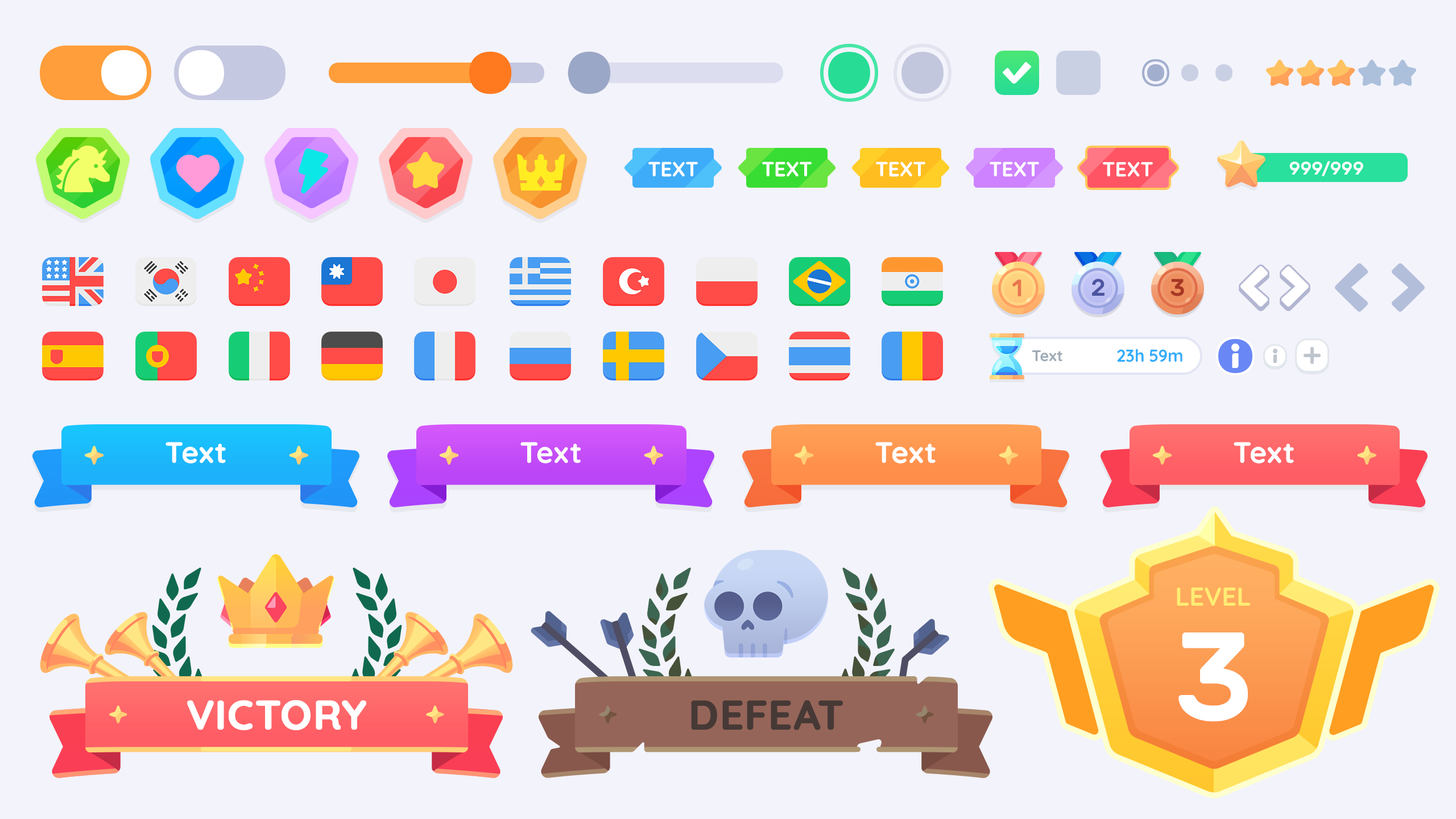
<style>
.page{position:relative;width:1456px;height:819px;background:#f3f3fb}
.page>*{position:absolute;margin:0}
.t1{font:20.5px "Quicksand-Bold";color:#ffffff;text-transform:uppercase}
.t2{font:20.5px "Quicksand-Bold";letter-spacing:0.01em;color:#ffffff;text-transform:uppercase}
.t3{font:18.2px "Rubik-Medium";color:#ffffff;text-transform:uppercase}
.t4{font:17.1px "Rubik-Medium";color:#ffffff;text-transform:uppercase}
.t5{font:23.9px "Rubik-Medium";letter-spacing:-0.01em;color:#ea764e}
.t6{font:23.9px "Rubik-Medium";letter-spacing:-0.01em;color:#4c549f}
.t7{font:23.9px "Rubik-Medium";letter-spacing:-0.01em;color:#a63724}
.t8{font:15.4px "Quicksand-Bold";letter-spacing:-0.01em;color:#9eaab4}
.t9{font:17.1px "Quicksand-Bold";letter-spacing:-0.01em;color:#34adfc}
.t10{font:29.6px "Quicksand-Bold";letter-spacing:0.025em;color:#ffffff}
.t11{font:26.2px "Quicksand-Bold";color:#ffec74;text-transform:uppercase}
.t12{font:125.1px "Rubik-Medium";letter-spacing:-0.01em;color:#ffffff}
.t13{font:40.9px "Quicksand-Bold";letter-spacing:0.01em;color:#ffffff;text-transform:uppercase;font-weight:bold}
.t14{font:40.9px "Quicksand-Bold";letter-spacing:0.01em;color:#463936;text-transform:uppercase;font-weight:bold}
</style>
<div class="page">
<p class="t1" style="left:648px;top:162px;width:50px;height:15px">Text</p>
<p class="t1" style="left:762px;top:162px;width:50px;height:15px">Text</p>
<p class="t1" style="left:876px;top:162px;width:49px;height:15px">Text</p>
<p class="t1" style="left:990px;top:162px;width:49px;height:15px">Text</p>
<p class="t2" style="left:1103px;top:162px;width:50px;height:15px">Text</p>
<p class="t3" style="left:1289px;top:161px;width:74px;height:15px">999<span class="t4">/</span>999</p>
<p class="t5" style="left:1012px;top:279px;width:9px;height:17px">1</p>
<p class="t6" style="left:1092px;top:279px;width:12px;height:17px">2</p>
<p class="t7" style="left:1170px;top:279px;width:14px;height:17px">3</p>
<p class="t8" style="left:1032px;top:350px;width:30px;height:12px">Text</p>
<p class="t9" style="left:1117px;top:349px;width:65px;height:13px">23h 59m</p>
<p class="t10" style="left:166px;top:442px;width:60px;height:22px">Text</p>
<p class="t10" style="left:520px;top:442px;width:61px;height:22px">Text</p>
<p class="t10" style="left:875px;top:442px;width:61px;height:22px">Text</p>
<p class="t10" style="left:1234px;top:442px;width:60px;height:22px">Text</p>
<p class="t11" style="left:1177px;top:588px;width:73px;height:18px">Level</p>
<p class="t12" style="left:1178px;top:632px;width:70px;height:90px">3</p>
<p class="t13" style="left:187px;top:700px;width:179px;height:30px">Victory</p>
<p class="t14" style="left:691px;top:700px;width:152px;height:30px">Defeat</p>
</div>
